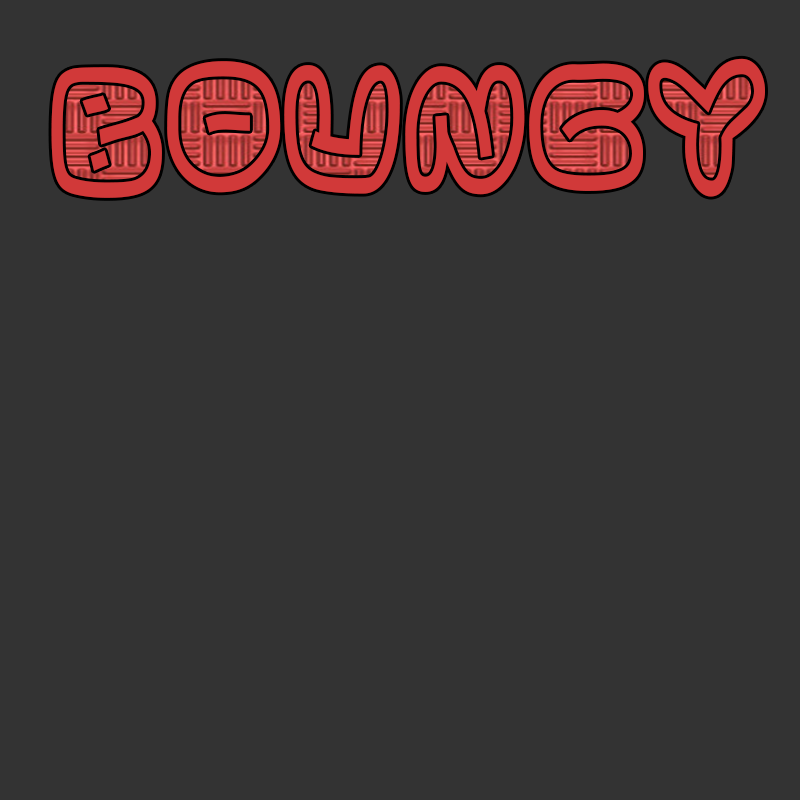
<style>
.page{position:relative;width:800px;height:800px;background:#333333}
.page>*{position:absolute;margin:0}
.t1{font:164.4px "Ghostmeat-Regular";color:#d13939;scale:0.72 1}
</style>
<div class="page">
<p class="t1" style="left:51px;top:58px;width:714px;height:140px">Bouncy</p>
</div>
